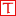
<style>
.page{position:relative;width:16px;height:16px;background:#ffffff}
.page>*{position:absolute;margin:0}
.t1{font:14px "Calligraphic421BT-RomanB";color:#e71010}
</style>
<div class="page">
<p class="t1" style="left:2px;top:2px;width:12px;height:12px">T</p>
</div>
